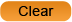
<style>
.page{position:relative;width:72px;height:22px}
.page>*{position:absolute;margin:0}
.t1{font:14px "ArialMT";letter-spacing:0.025em;color:#000000}
</style>
<div class="page">
<p class="t1" style="left:18px;top:6px;width:36px;height:10px">Clear</p>
</div>
